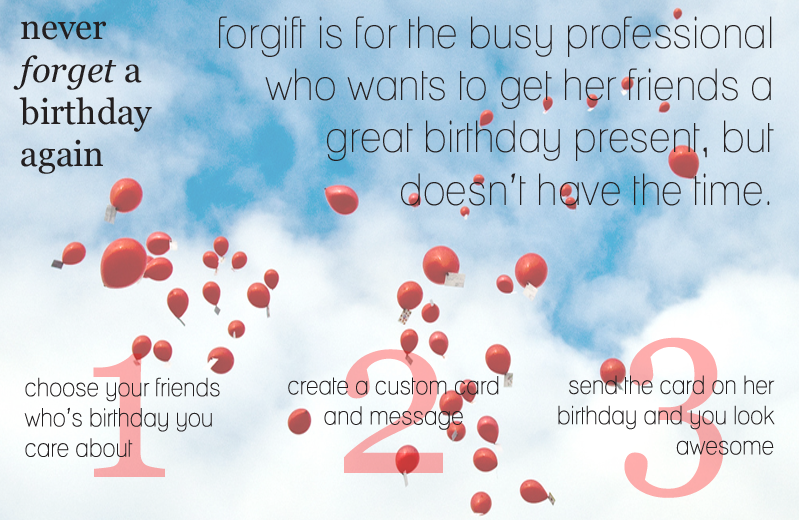
<style>
.page{position:relative;width:799px;height:520px}
.page>*{position:absolute;margin:0}
.t1{font:43.7px "Lane-Narrow";color:#231f20;scale:0.94 1}
.t2{font:35.3px "Georgia";color:#231f20}
.t3{font:35.3px "Georgia-Italic";color:#231f20}
.t4{font:222.7px "Georgia";color:#fcacab;scale:0.94 1}
.t5{font:228.6px "Georgia";color:#f8aaab;scale:0.94 1}
.t6{font:25.2px "Lane-Narrow";color:#231f20;scale:0.94 1}
</style>
<div class="page">
<p class="t1" style="left:219px;top:16px;width:555px;height:190px;text-align:right">forgift is for the busy professional who wants to get her friends a great birthday present, but doesn’t have the time.</p>
<p class="t2" style="left:13px;top:21px;width:139px;height:153px">never <br><span class="t3">forget </span>a<br>birthday<br>again</p>
<p class="t4" style="left:624px;top:337px;width:100px;height:161px">3</p>
<p class="t5" style="left:93px;top:353px;width:72px;height:124px">1</p>
<p class="t5" style="left:344px;top:349px;width:99px;height:124px">2</p>
<p class="t6" style="left:24px;top:377px;width:196px;height:80px">choose your friends who’s birthday you care about</p>
<p class="t6" style="left:288px;top:376px;width:211px;height:54px;text-align:center">create a custom card and message</p>
<p class="t6" style="left:558px;top:375px;width:217px;height:80px;text-align:right">send the card on her birthday and you look awesome</p>
</div>
